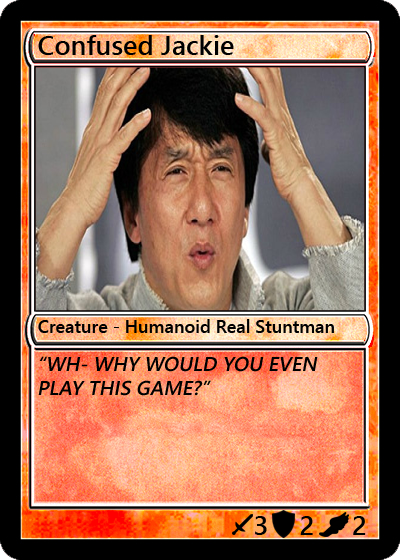
<style>
.page{position:relative;width:400px;height:560px}
.page>*{position:absolute;margin:0}
.t1{font:27px "YuGothicUI-Semibold";color:#000000}
.t2{font:18px "YuGothicUI-Semibold";color:#000000}
.t3{font:20px "YuGothicUI-Semibold";color:#000000;font-style:italic}
</style>
<div class="page">
<p class="t1" style="left:38px;top:35px;width:196px;height:20px">Confused Jackie</p>
<p class="t2" style="left:38px;top:319px;width:296px;height:14px">Creature - Humanoid Real Stuntman</p>
<p class="t3" style="left:38px;top:356px;width:280px;height:40px">“WH- WHY WOULD YOU EVEN PLAY THIS GAME?”</p>
<p class="t1" style="left:255px;top:516px;width:12px;height:19px">3</p>
<p class="t1" style="left:300px;top:516px;width:13px;height:19px">2</p>
<p class="t1" style="left:353px;top:516px;width:13px;height:19px">2</p>
</div>
